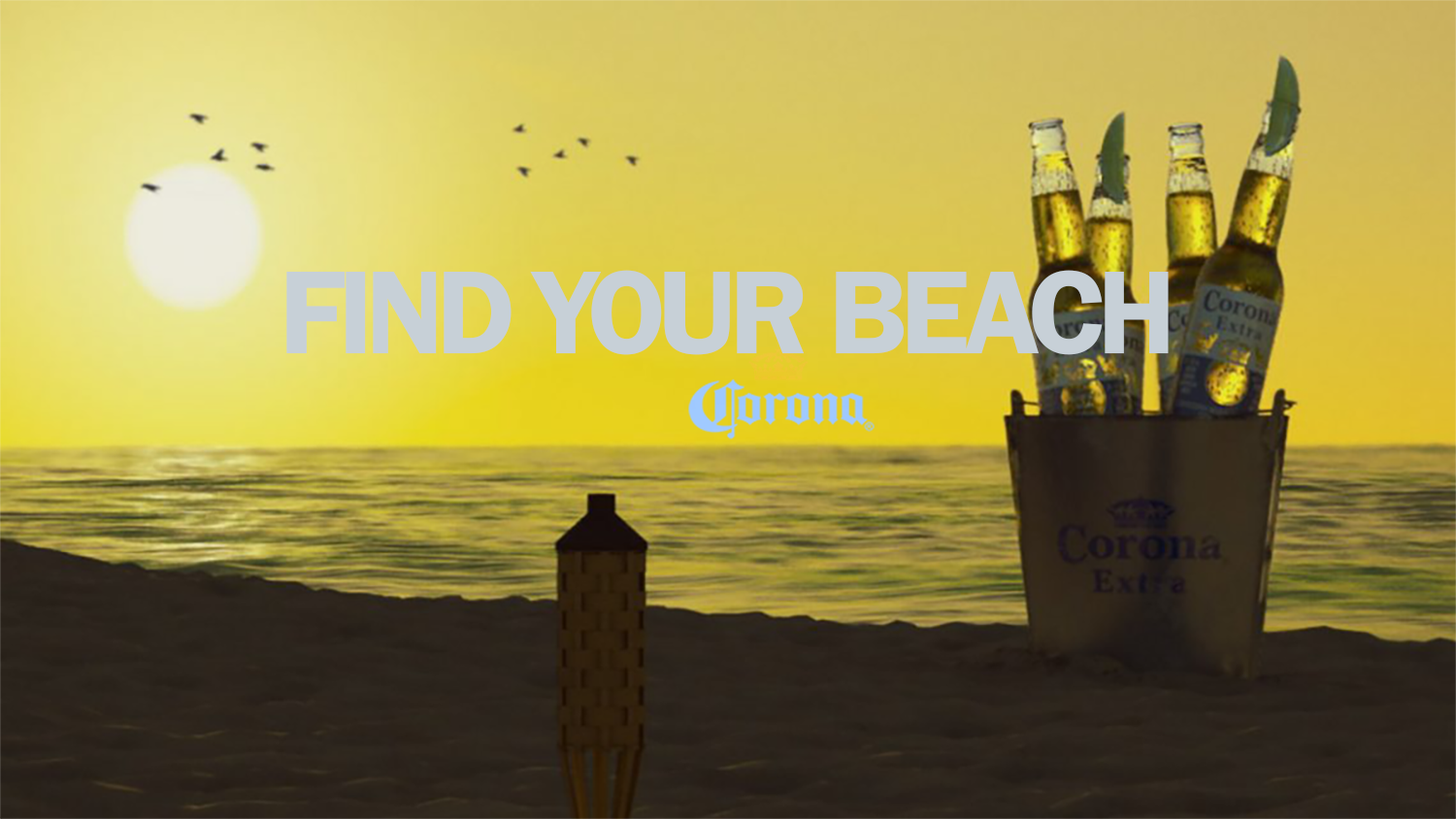
<style>
.page{position:relative;width:1456px;height:819px}
.page>*{position:absolute;margin:0}
.t1{font:122.7px "FranklinGothic-Demi";letter-spacing:-0.05em;color:#c7d0d7}
</style>
<div class="page">
<p class="t1" style="left:286px;top:270px;width:882px;height:85px">FIND YOUR BEACH</p>
</div>
